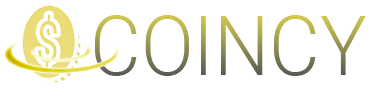
<style>
.page{position:relative;width:384px;height:90px;background:#ffffff}
.page>*{position:absolute;margin:0}
.t1{font:82.8px "Roboto-Light";text-transform:uppercase;scale:0.94 1}
</style>
<div class="page">
<p class="t1" style="left:95px;top:15px;width:271px;height:61px">COINCY</p>
</div>
